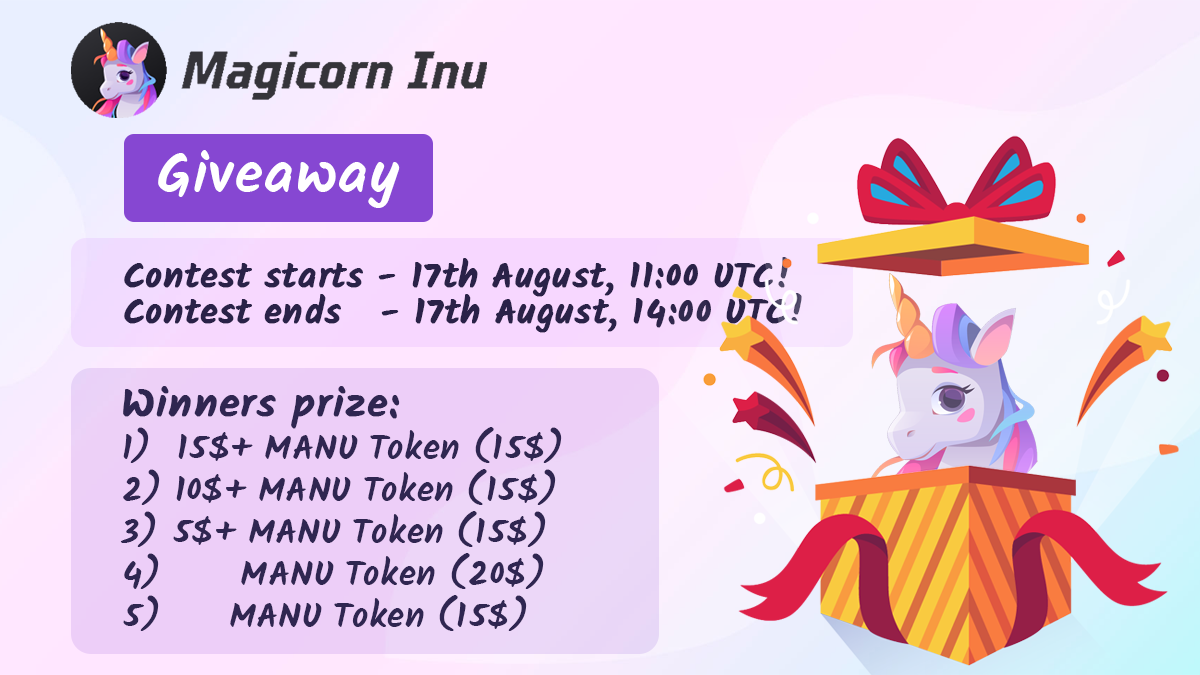
<style>
.page{position:relative;width:1200px;height:675px}
.page>*{position:absolute;margin:0}
.t1{font:58.9px "Kalam-Bold";letter-spacing:0.025em;color:#ffffff}
.t2{font:36px/36px "Kalam-Bold";letter-spacing:0.025em;color:#2a2248;font-weight:bold}
.t3{font:36px/42px "Kalam-Bold";letter-spacing:0.025em;color:#20203a}
.t4{font:42px/42px "Kalam-Bold";letter-spacing:0.025em;color:#20203a;font-weight:bold}
</style>
<div class="page">
<p class="t1" style="left:158px;top:150px;width:242px;height:58px">Giveaway</p>
<p class="t2" style="left:124px;top:257px;width:678px;height:76px">Contest starts - 17th August, 11:00 UTC! <br>Contest ends   - 17th August, 14:00 UTC!</p>
<p class="t3" style="left:120px;top:386px;width:442px;height:245px"><span class="t4">Winners prize: <br></span>1)  15$+ MANU Token (15$)<br>2) 10$+ MANU Token (15$) <br>3) 5$+ MANU Token (15$) <br>4)   MANU Token (20$)<br>5)    MANU Token (15$)</p>
</div>
